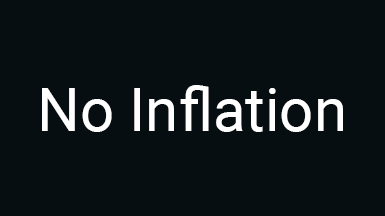
<style>
.page{position:relative;width:385px;height:216px;background:#060e12}
.page>*{position:absolute;margin:0}
.t1{font:60px "Roboto-Regular";color:#ffffff}
</style>
<div class="page">
<p class="t1" style="left:42px;top:85px;width:301px;height:47px">No Inflation</p>
</div>
